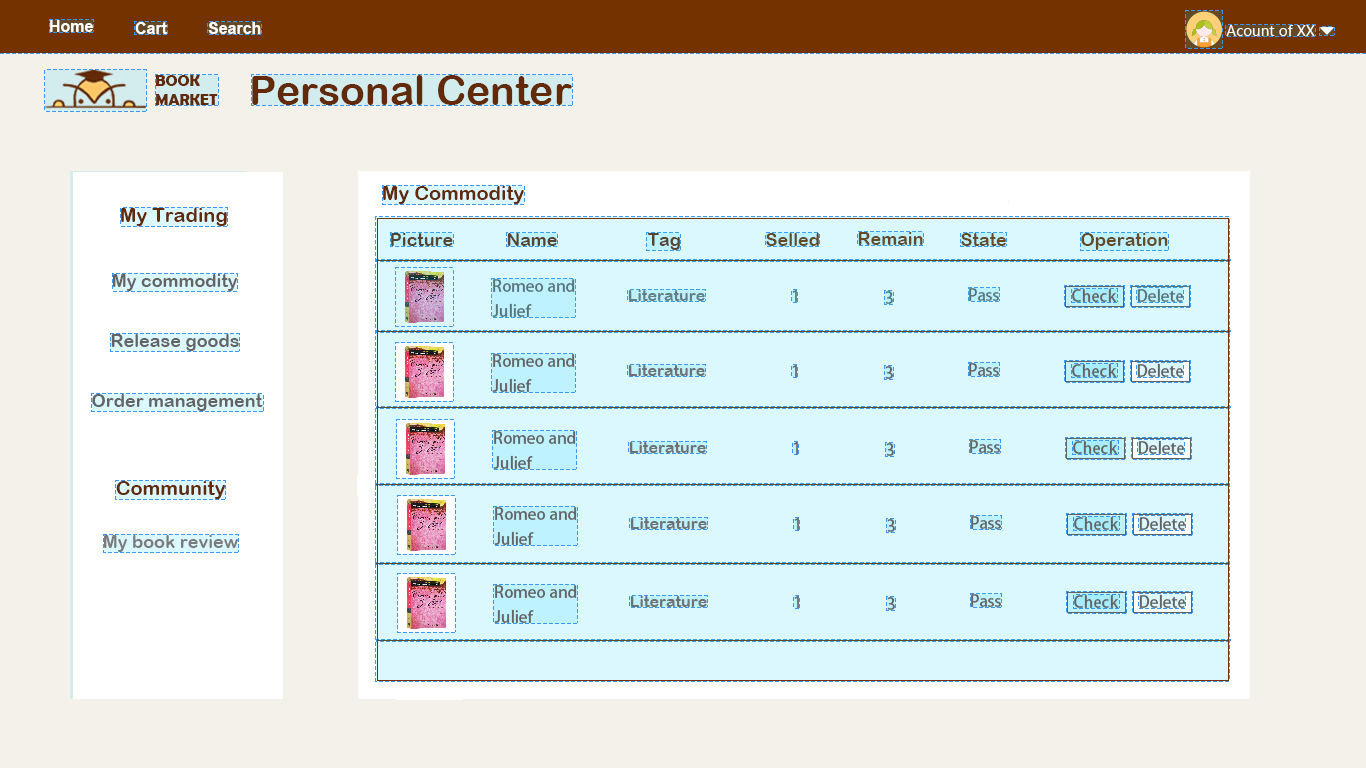
<style>
.page{position:relative;width:1366px;height:768px;background:#f4f1ea}
.page>*{position:absolute;margin:0}
.t1{font:16px "Arial-BoldMT";color:#ffffff}
.t2{font:14px "MicrosoftYaHeiUI";color:#ffffff}
.t3{font:15.9px/9.5px "BerlinSansFBDemi-Bold";color:#622a09}
.t4{font:40.9px "ArialRoundedMTBold";color:#622a09}
.t5{font:20px "ArialRoundedMTBold";color:#622a09}
.t6{font:18px "ArialRoundedMTBold";color:#57432e}
.t7{font:18px "ArialRoundedMTBold";color:#664a26}
.t8{font:18px "ArialRoundedMTBold";color:#656464}
.t9{font:16px/25px "AdobeHeitiStd-Regular";color:#656464}
.t10{font:16px "ArialRoundedMTBold";color:#727171}
.t11{font:16px "AdobeHeitiStd-Regular";color:#656464}
.t12{font:18px "ArialRoundedMTBold";color:#7c7b7b}
</style>
<div class="page">
<p class="t1" style="left:50px;top:20px;width:43px;height:12px">Home</p>
<p class="t1" style="left:135px;top:22px;width:32px;height:12px">Cart</p>
<p class="t1" style="left:208px;top:22px;width:53px;height:12px">Search</p>
<p class="t2" style="left:1226px;top:25px;width:89px;height:11px">Acount of XX</p>
<p class="t3" style="left:156px;top:75px;width:62px;height:30px">BOOK <br><br>MARKET</p>
<p class="t4" style="left:252px;top:75px;width:320px;height:30px">Personal Center</p>
<p class="t5" style="left:383px;top:186px;width:141px;height:18px">My Commodity</p>
<p class="t5" style="left:121px;top:208px;width:106px;height:18px">My Trading</p>
<p class="t6" style="left:391px;top:233px;width:62px;height:13px">Picture</p>
<p class="t6" style="left:507px;top:233px;width:50px;height:13px">Name</p>
<p class="t6" style="left:647px;top:233px;width:33px;height:17px">Tag</p>
<p class="t7" style="left:766px;top:233px;width:53px;height:13px">Selled</p>
<p class="t7" style="left:858px;top:232px;width:65px;height:13px">Remain</p>
<p class="t7" style="left:961px;top:233px;width:45px;height:13px">State</p>
<p class="t7" style="left:1081px;top:233px;width:87px;height:17px">Operation</p>
<p class="t8" style="left:113px;top:274px;width:124px;height:17px">My commodity</p>
<p class="t9" style="left:492px;top:279px;width:83px;height:38px">Romeo and <br>Julief</p>
<p class="t10" style="left:628px;top:290px;width:77px;height:11px">Literature</p>
<p class="t11" style="left:792px;top:290px;width:5px;height:12px">1</p>
<p class="t11" style="left:885px;top:291px;width:8px;height:13px">3</p>
<p class="t11" style="left:969px;top:288px;width:30px;height:13px">Pass</p>
<p class="t11" style="left:1072px;top:289px;width:45px;height:13px">Check</p>
<p class="t11" style="left:1137px;top:288px;width:46px;height:14px">Delete</p>
<p class="t8" style="left:111px;top:334px;width:128px;height:17px">Release goods</p>
<p class="t9" style="left:492px;top:354px;width:83px;height:38px">Romeo and <br>Julief</p>
<p class="t10" style="left:628px;top:365px;width:77px;height:11px">Literature</p>
<p class="t11" style="left:792px;top:365px;width:5px;height:12px">1</p>
<p class="t11" style="left:885px;top:366px;width:8px;height:13px">3</p>
<p class="t11" style="left:969px;top:363px;width:30px;height:13px">Pass</p>
<p class="t11" style="left:1072px;top:364px;width:45px;height:13px">Check</p>
<p class="t11" style="left:1137px;top:363px;width:46px;height:14px">Delete</p>
<p class="t8" style="left:92px;top:394px;width:171px;height:17px">Order management</p>
<p class="t9" style="left:493px;top:431px;width:83px;height:38px">Romeo and <br>Julief</p>
<p class="t10" style="left:629px;top:442px;width:77px;height:11px">Literature</p>
<p class="t11" style="left:793px;top:442px;width:5px;height:12px">1</p>
<p class="t11" style="left:886px;top:443px;width:8px;height:13px">3</p>
<p class="t11" style="left:970px;top:440px;width:30px;height:13px">Pass</p>
<p class="t11" style="left:1073px;top:441px;width:45px;height:13px">Check</p>
<p class="t11" style="left:1138px;top:440px;width:46px;height:14px">Delete</p>
<p class="t5" style="left:116px;top:481px;width:109px;height:18px">Community</p>
<p class="t9" style="left:494px;top:507px;width:83px;height:38px">Romeo and <br>Julief</p>
<p class="t10" style="left:630px;top:518px;width:77px;height:11px">Literature</p>
<p class="t11" style="left:794px;top:518px;width:5px;height:12px">1</p>
<p class="t11" style="left:887px;top:519px;width:8px;height:13px">3</p>
<p class="t11" style="left:971px;top:516px;width:30px;height:13px">Pass</p>
<p class="t11" style="left:1074px;top:517px;width:45px;height:13px">Check</p>
<p class="t11" style="left:1139px;top:516px;width:46px;height:14px">Delete</p>
<p class="t12" style="left:104px;top:535px;width:134px;height:17px">My book review</p>
<p class="t9" style="left:494px;top:585px;width:83px;height:38px">Romeo and <br>Julief</p>
<p class="t10" style="left:630px;top:596px;width:77px;height:11px">Literature</p>
<p class="t11" style="left:794px;top:596px;width:5px;height:12px">1</p>
<p class="t11" style="left:887px;top:597px;width:8px;height:13px">3</p>
<p class="t11" style="left:971px;top:594px;width:30px;height:13px">Pass</p>
<p class="t11" style="left:1074px;top:595px;width:45px;height:13px">Check</p>
<p class="t11" style="left:1139px;top:594px;width:46px;height:14px">Delete</p>
</div>
